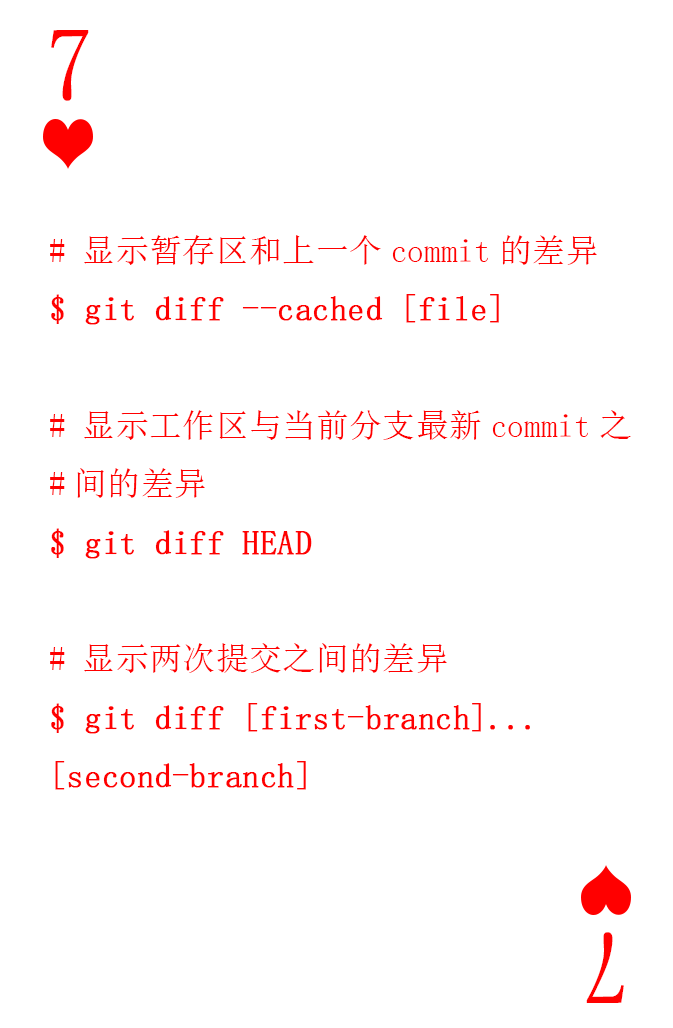
<style>
.page{position:relative;width:673px;height:1028px;background:#ffffff}
.page>*{position:absolute;margin:0}
.t1{font:104.2px "SimSun-ExtB";color:#ff0101;scale:0.93 1}
.t2{font:33.3px "SimSun";color:#ff0000;font-weight:bold}
.t3{font:33.3px "SimSun";color:#ff0000}
</style>
<div class="page">
<p class="t1" style="left:51px;top:30px;width:38px;height:71px">7</p>
<p class="t2" style="left:50px;top:235px;width:581px;height:555px"><span class="t3"># 显示暂存区和上一个commit的差异<br></span>$ git diff --cached [file]<br><span class="t3"><br># 显示工作区与当前分支最新commit之<br>#间的差异<br></span>$ git diff HEAD<br><span class="t3"><br># 显示两次提交之间的差异<br></span>$ git diff [first-branch]...<br>[second-branch]</p>
<p class="t1" style="left:586px;top:932px;width:38px;height:71px;rotate:180deg">7</p>
</div>
